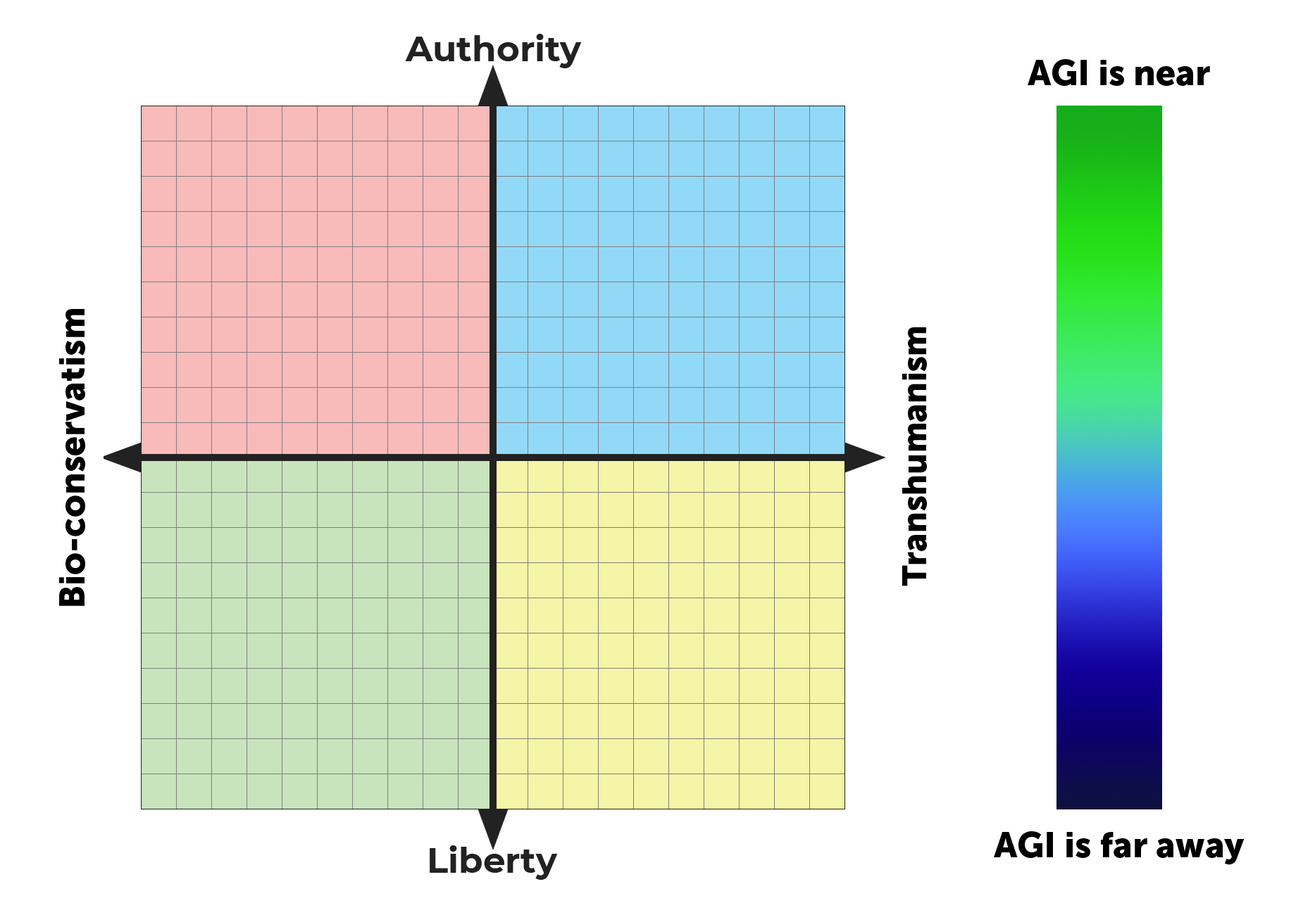
<style>
.page{position:relative;width:1303px;height:915px;background:#ffffff}
.page>*{position:absolute;margin:0}
.t1{font:35.2px "MuseoSans-900";color:#000000}
.t2{font:33.6px "MuseoSans-900";color:#000000}
</style>
<div class="page">
<p class="t1" style="left:1027px;top:59px;width:183px;height:27px">AGI is near</p>
<p class="t1" style="left:59px;top:309px;width:26px;height:297px;rotate:-90deg">Bio-conservatism</p>
<p class="t2" style="left:902px;top:327px;width:25px;height:260px;rotate:-90deg">Transhumanism</p>
<p class="t1" style="left:994px;top:832px;width:250px;height:33px">AGI is far away</p>
</div>
